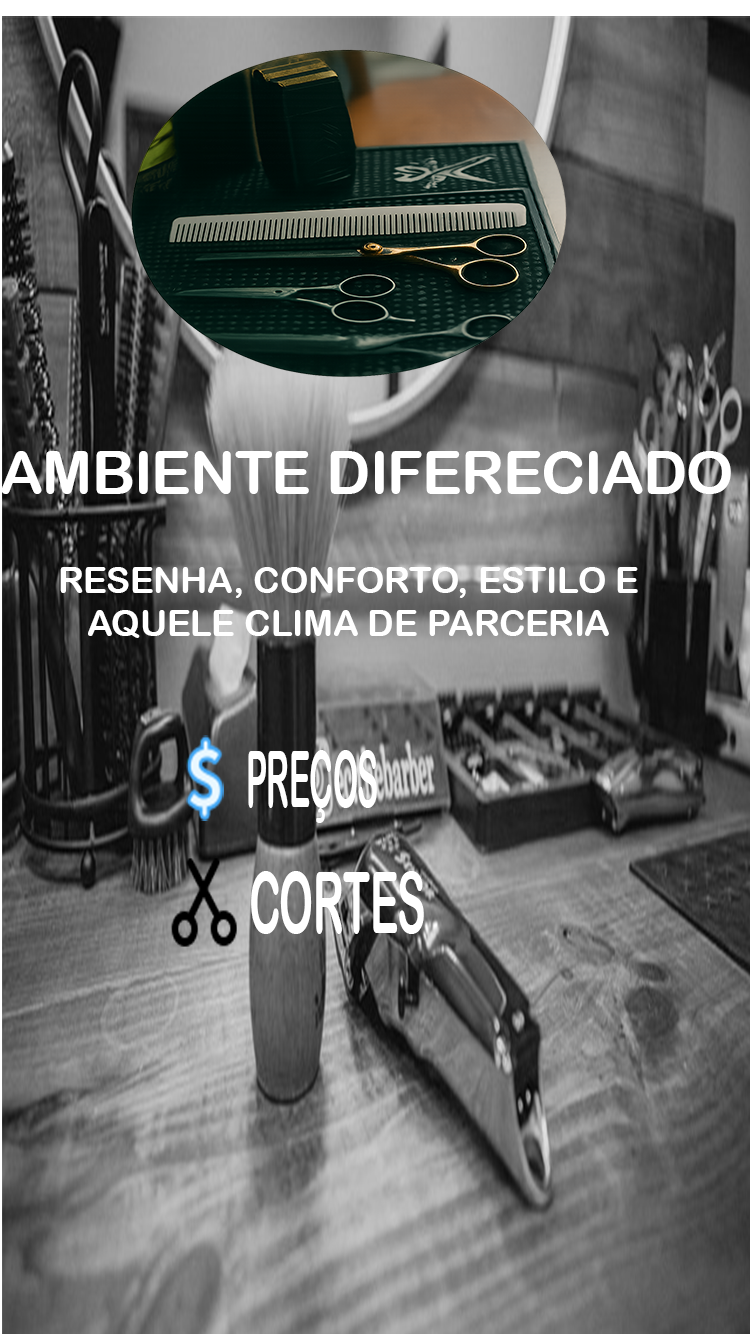
<style>
.page{position:relative;width:750px;height:1334px}
.page>*{position:absolute;margin:0}
.t1{font:60px "ArialRoundedMTBold";color:#ffffff;text-transform:uppercase}
.t2{font:36px "ArialRoundedMTBold";color:#ffffff;text-transform:uppercase}
.t3{font:77.8px "ArialRoundedMTBold";color:#ffffff;text-transform:uppercase;scale:0.41 1}
.t4{font:84.7px "ArialRoundedMTBold";color:#ffffff;text-transform:uppercase;scale:0.5 1}
</style>
<div class="page">
<p class="t1" style="left:1px;top:451px;width:730px;height:43px">ambiente difereciado</p>
<p class="t2" style="left:60px;top:567px;width:578px;height:71px;text-align:center">resenha, conforto, estilo e <br>aquele clima de parceria</p>
<p class="t3" style="left:248px;top:750px;width:129px;height:73px">preços</p>
<p class="t4" style="left:251px;top:871px;width:173px;height:63px">cortes</p>
</div>
